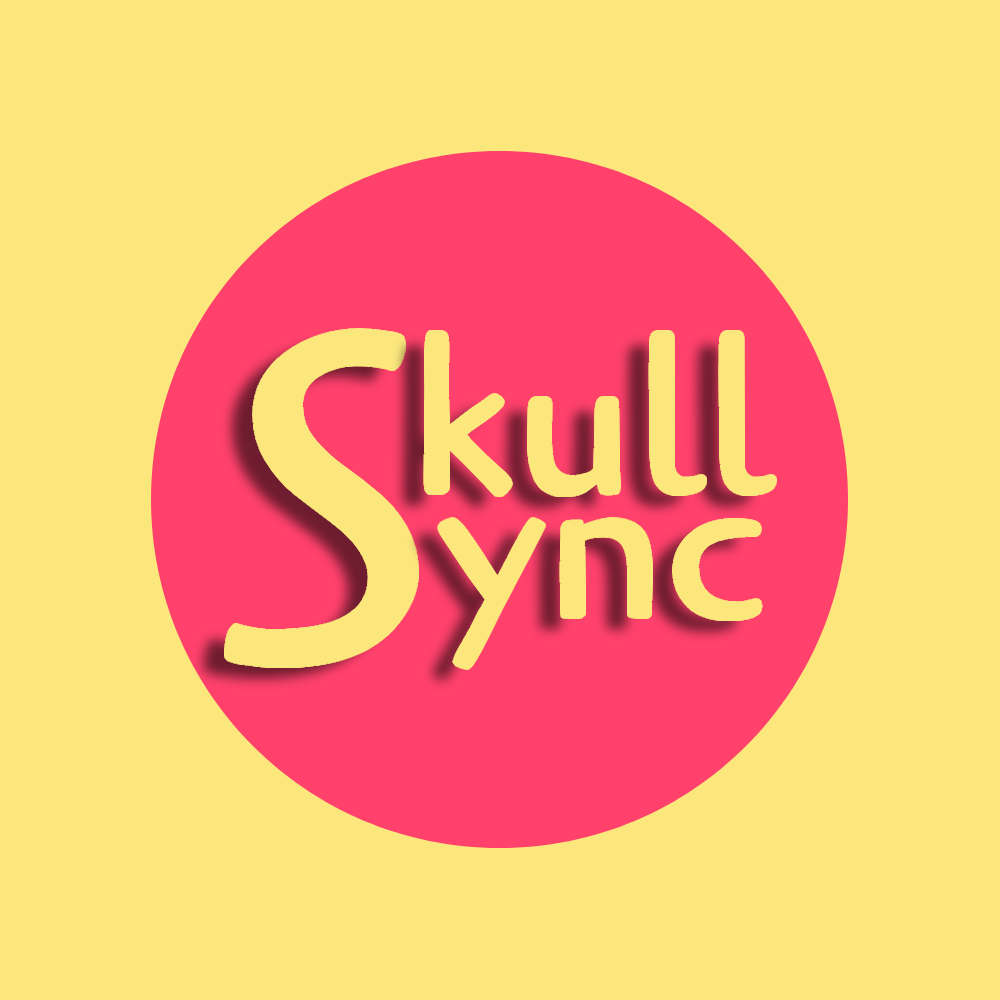
<style>
.page{position:relative;width:1000px;height:1000px;background:#fce77d}
.page>*{position:absolute;margin:0}
.t1{font:462px "Cagliostro-Regular";color:#fce77d}
.t2{font:216.2px "Cagliostro-Regular";color:#fce77d}
</style>
<div class="page">
<p class="t1" style="left:226px;top:331px;width:191px;height:335px">S</p>
<p class="t2" style="left:426px;top:332px;width:349px;height:163px">kull</p>
<p class="t2" style="left:440px;top:520px;width:320px;height:147px">ync</p>
</div>
